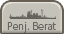
<style>
.page{position:relative;width:64px;height:34px;background:#c5c2b9}
.page>*{position:absolute;margin:0}
.t1{font:10px "UDShinGoPro-Light";color:#6a6560;scale:0.9 1}
</style>
<div class="page">
<p class="t1" style="left:7px;top:22px;width:49px;height:11px">Penj. Berat</p>
</div>
